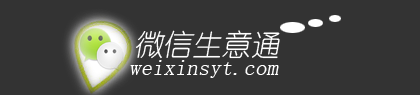
<style>
.page{position:relative;width:420px;height:95px;background:#333333}
.page>*{position:absolute;margin:0}
.t1{font:29.2px "YouYuan";color:#ffffff;font-style:italic}
.t2{font:22.9px "YouYuan";color:#ffffff;font-style:italic}
</style>
<div class="page">
<p class="t1" style="left:136px;top:30px;width:144px;height:29px">微信生意通</p>
<p class="t2" style="left:130px;top:60px;width:149px;height:18px">weixinsyt.com</p>
</div>
